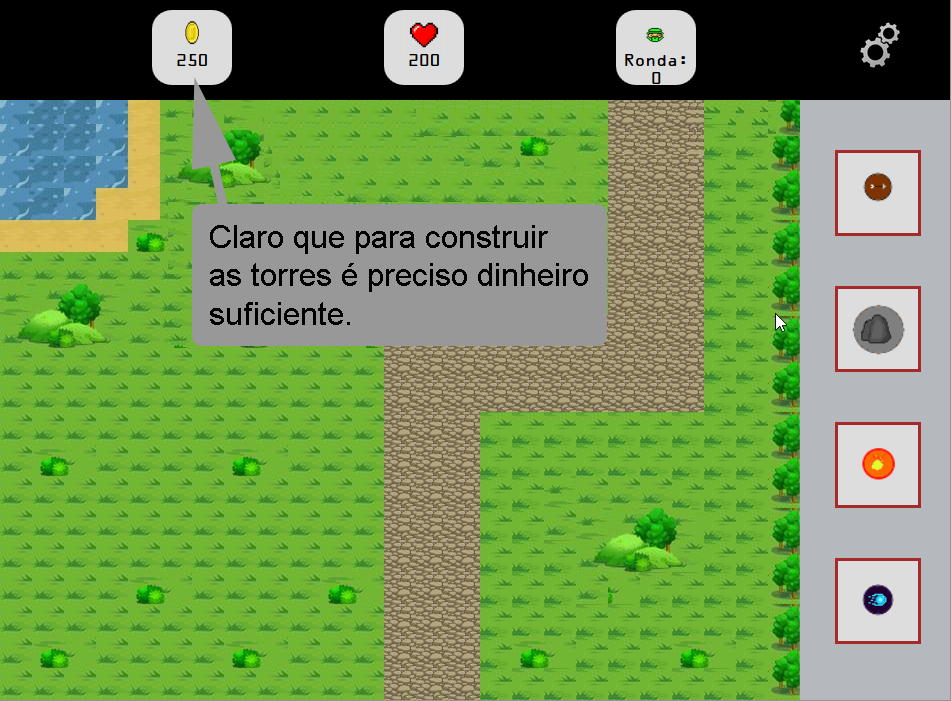
<style>
.page{position:relative;width:951px;height:701px}
.page>*{position:absolute;margin:0}
.t1{font:32px "ArialMT";color:#000000}
</style>
<div class="page">
<p class="t1" style="left:210px;top:225px;width:378px;height:100px">Claro que para construir<br>as torres é preciso dinheiro <br>suficiente.</p>
</div>
